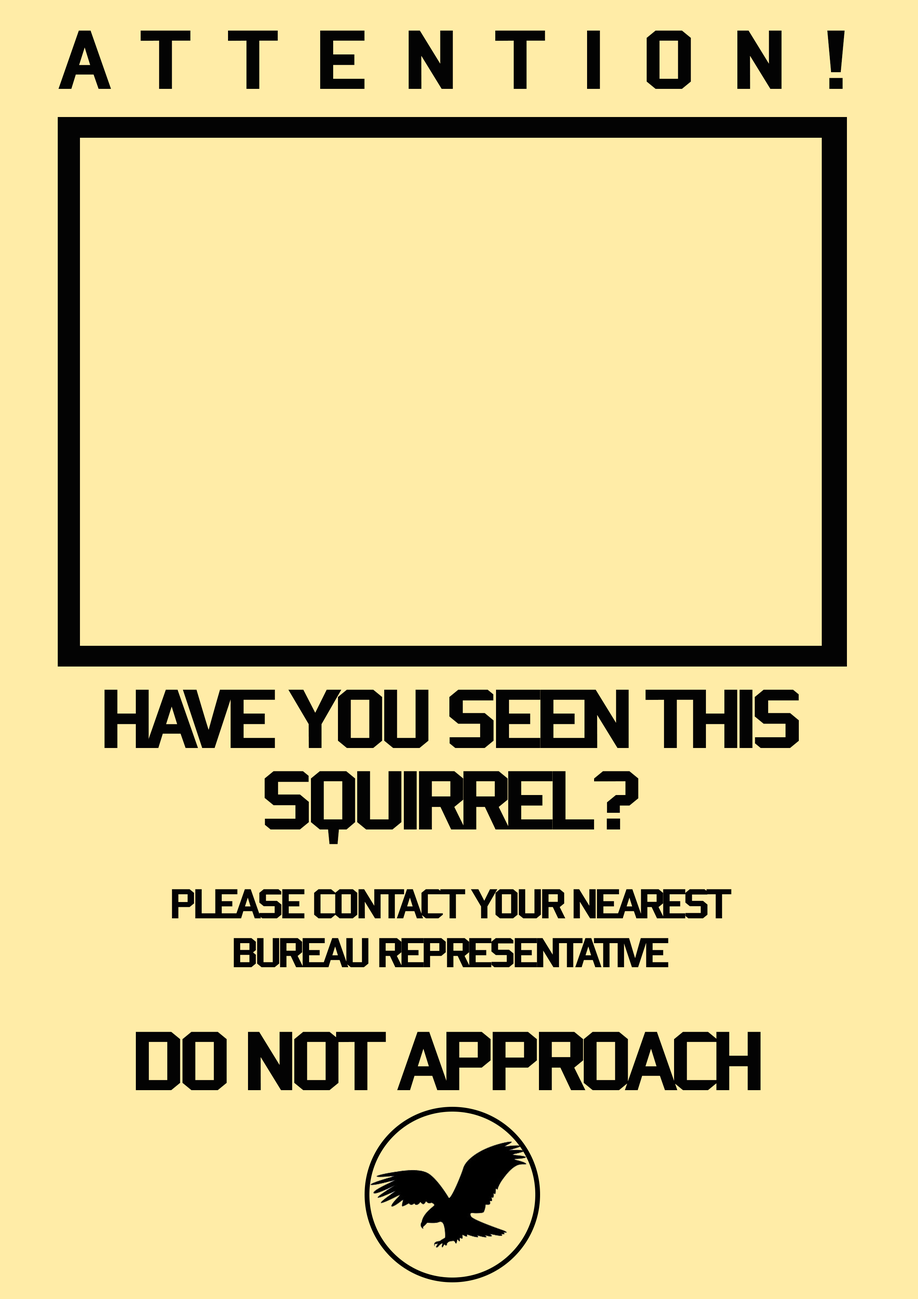
<style>
.page{position:relative;width:918px;height:1299px;background:#ffeca7}
.page>*{position:absolute;margin:0}
.t1{font:91.1px "Bombardier";letter-spacing:0.32em;color:#030303;scale:1.22 1}
.t2{font:91.1px "Bombardier";letter-spacing:-0.08em;color:#030303;scale:1.22 1}
.t3{font:45.5px "Bombardier";letter-spacing:-0.08em;color:#030303;scale:1.22 1}
</style>
<div class="page">
<p class="t1" style="left:58px;top:30px;width:787px;height:59px">ATTENTION!</p>
<p class="t2" style="left:104px;top:689px;width:695px;height:59px">HAVE YOU SEEN THIS</p>
<p class="t2" style="left:265px;top:771px;width:374px;height:73px">SQUIRREL?</p>
<p class="t3" style="left:172px;top:889px;width:560px;height:29px">PLEASE CONTACT YOUR NEAREST</p>
<p class="t3" style="left:234px;top:938px;width:435px;height:29px">BUREAU REPRESENTATIVE</p>
<p class="t2" style="left:136px;top:1031px;width:625px;height:59px">DO NOT APPROACH</p>
</div>
